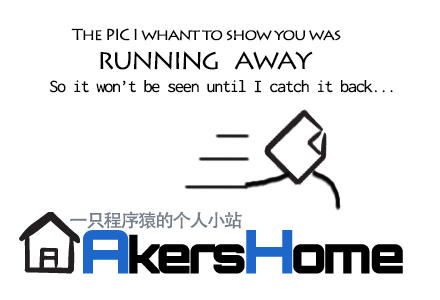
<style>
.page{position:relative;width:440px;height:300px;background:#ffffff}
.page>*{position:absolute;margin:0}
.t1{font:16px "LithosPro-Regular";letter-spacing:-0.08em;color:#030303;scale:1.04 1}
.t2{font:24px "LithosPro-Regular";letter-spacing:-0.08em;color:#030303;scale:1.04 1}
.t3{font:18px "Inconsolata";letter-spacing:-0.08em;color:#030303;scale:1.04 1}
.t4{font:18px "AdobeHeitiStd-Regular";letter-spacing:-0.08em;color:#747e8d;scale:1.04 1}
</style>
<div class="page">
<p class="t1" style="left:71px;top:28px;width:270px;height:13px">The PIC I whant to show you was</p>
<p class="t2" style="left:100px;top:51px;width:213px;height:19px">RUNNING   AWAY</p>
<p class="t3" style="left:49px;top:80px;width:344px;height:13px">So it won’t be seen until I catch it back...</p>
<p class="t4" style="left:70px;top:211px;width:172px;height:18px">一只程序猿的个人小站</p>
</div>
